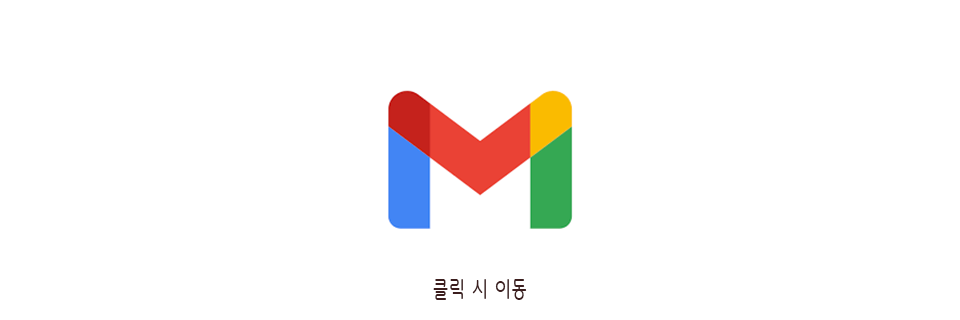
<style>
.page{position:relative;width:960px;height:320px;background:#ffffff}
.page>*{position:absolute;margin:0}
.t1{font:21.6px "HancomMalangMalang-Regular";letter-spacing:0.05em;color:#3c1e1e;scale:0.83 1}
</style>
<div class="page">
<p class="t1" style="left:433px;top:279px;width:94px;height:21px">클릭 시 이동</p>
</div>
